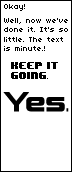
<style>
.page{position:relative;width:72px;height:172px;background:#ffffff}
.page>*{position:absolute;margin:0}
.t1{font:8px "04b03";color:#000000}
.t2{font:8px "8BITWONDERNominal";color:#000000}
.t3{font:8px "MyriadPro-Regular";color:#000000}
.t4{font:24px "Korataki-Regular";color:#000000}
.t5{font:24px "Korataki-Extralight";color:#000000}
</style>
<div class="page">
<p class="t1" style="left:4px;top:4px;width:21px;height:7px">Okay!</p>
<p class="t1" style="left:4px;top:18px;width:64px;height:33px">Well, now we've<br>done it. It's so<br>little. The text<br>is minute.!</p>
<p class="t2" style="left:11px;top:62px;width:47px;height:17px">Keep it<br>going<span class="t3">.</span></p>
<p class="t4" style="left:3px;top:92px;width:66px;height:20px">Yes<span class="t5">.</span></p>
</div>
